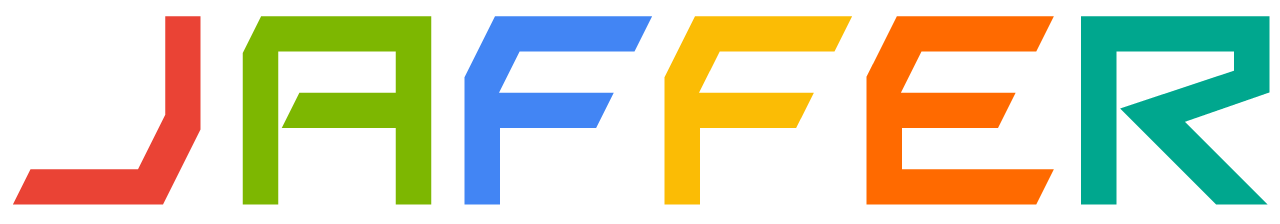
<style>
.page{position:relative;width:1280px;height:224px;background:#ffffff}
.page>*{position:absolute;margin:0}
.t1{font:299px "BitingMyNails";letter-spacing:0.01em;color:#ea4335;text-transform:uppercase}
.t2{font:299px "BitingMyNails";letter-spacing:0.01em;color:#7db701;text-transform:uppercase}
.t3{font:299px "BitingMyNails";letter-spacing:0.01em;color:#4285f4;text-transform:uppercase}
.t4{font:299px "BitingMyNails";letter-spacing:0.01em;color:#fbbc05;text-transform:uppercase}
.t5{font:299px "BitingMyNails";letter-spacing:0.01em;color:#ff6a00;text-transform:uppercase}
.t6{font:299px "BitingMyNails";letter-spacing:0.01em;color:#00a78e;text-transform:uppercase}
</style>
<div class="page">
<p class="t1" style="left:13px;top:16px;width:1257px;height:189px">j<span class="t2">a</span><span class="t3">f</span><span class="t4">f</span><span class="t5">e</span><span class="t6">r</span></p>
</div>
